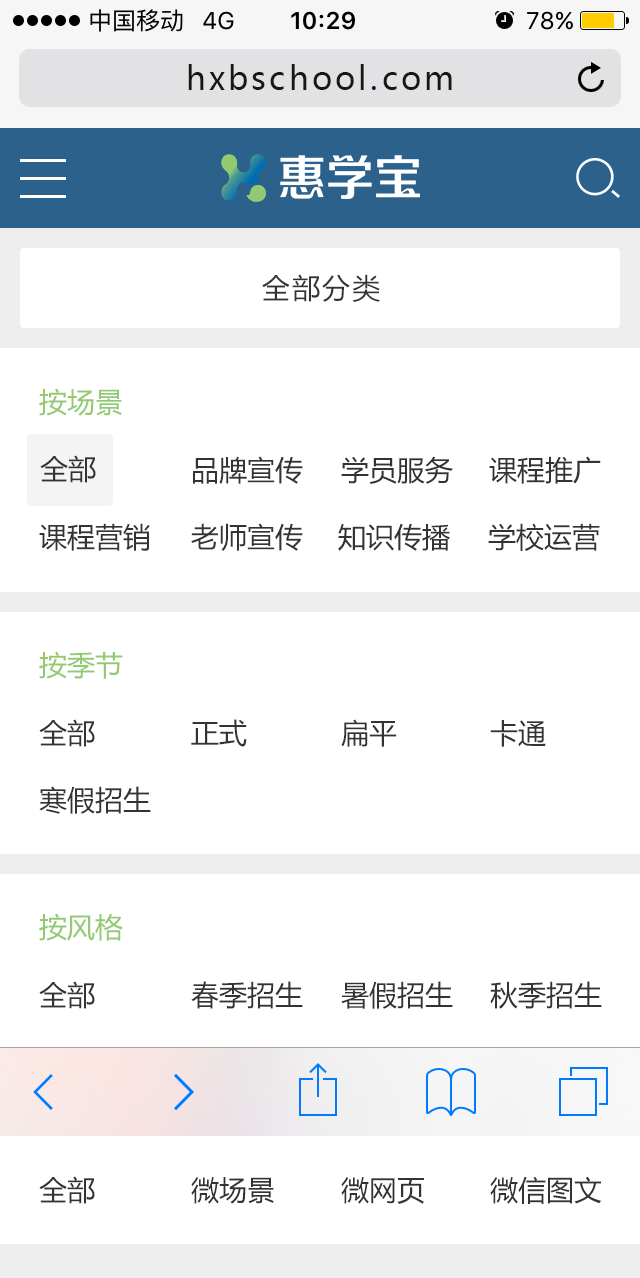
<style>
.page{position:relative;width:640px;height:1278px;background:#ffffff}
.page>*{position:absolute;margin:0}
.t1{font:32px "MicrosoftYaHei";letter-spacing:0.1em;color:#171717}
.t2{font:28px "MicrosoftYaHei";letter-spacing:0.075em;color:#333333}
.t3{font:28px "MicrosoftYaHei";color:#93c971}
.t4{font:28px "MicrosoftYaHei";color:#333333}
</style>
<div class="page">
<p class="t1" style="left:188px;top:64px;width:264px;height:26px">hxbschool.com</p>
<p class="t2" style="left:262px;top:274px;width:118px;height:28px">全部分类</p>
<p class="t3" style="left:39px;top:388px;width:83px;height:28px">按场景</p>
<p class="t4" style="left:40px;top:455px;width:56px;height:28px">全部</p>
<p class="t4" style="left:193px;top:456px;width:110px;height:28px">品牌宣传</p>
<p class="t4" style="left:341px;top:456px;width:112px;height:28px">学员服务</p>
<p class="t4" style="left:489px;top:456px;width:112px;height:28px">课程推广</p>
<p class="t4" style="left:39px;top:523px;width:111px;height:28px">课程营销</p>
<p class="t4" style="left:191px;top:523px;width:112px;height:28px">老师宣传</p>
<p class="t4" style="left:338px;top:523px;width:112px;height:28px">知识传播</p>
<p class="t4" style="left:488px;top:523px;width:112px;height:28px">学校运营</p>
<p class="t3" style="left:39px;top:651px;width:84px;height:28px">按季节</p>
<p class="t4" style="left:39px;top:719px;width:56px;height:28px">全部</p>
<p class="t4" style="left:191px;top:719px;width:56px;height:28px">正式</p>
<p class="t4" style="left:341px;top:719px;width:56px;height:28px">扁平</p>
<p class="t4" style="left:490px;top:720px;width:56px;height:27px">卡通</p>
<p class="t4" style="left:39px;top:786px;width:112px;height:28px">寒假招生</p>
<p class="t3" style="left:39px;top:913px;width:84px;height:28px">按风格</p>
<p class="t4" style="left:39px;top:981px;width:56px;height:28px">全部</p>
<p class="t4" style="left:191px;top:981px;width:112px;height:28px">春季招生</p>
<p class="t4" style="left:341px;top:981px;width:112px;height:28px">暑假招生</p>
<p class="t4" style="left:490px;top:981px;width:112px;height:28px">秋季招生</p>
<p class="t4" style="left:39px;top:1176px;width:56px;height:28px">全部</p>
<p class="t4" style="left:191px;top:1177px;width:83px;height:27px">微场景</p>
<p class="t4" style="left:341px;top:1177px;width:83px;height:27px">微网页</p>
<p class="t4" style="left:490px;top:1176px;width:112px;height:28px">微信图文</p>
</div>
